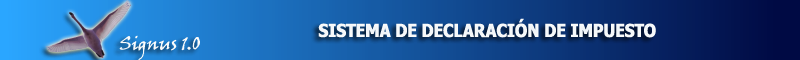
<style>
.page{position:relative;width:800px;height:60px}
.page>*{position:absolute;margin:0}
.t1{font:18px "Nina-Bold";color:#eaf0f6}
.t2{font:18px "VinerHandITC";color:#eaf0f6}
</style>
<div class="page">
<p class="t1" style="left:318px;top:18px;width:338px;height:20px">SISTEMA DE DECLARACIÓN DE IMPUESTO</p>
<p class="t2" style="left:119px;top:35px;width:81px;height:26px">Signus 1.0</p>
</div>
